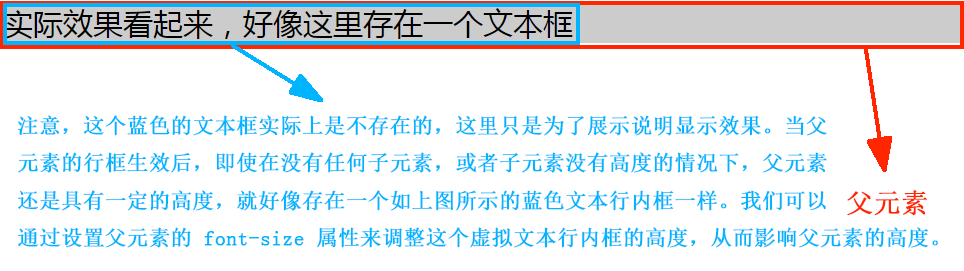
<style>
.page{position:relative;width:964px;height:271px;background:#ffffff}
.page>*{position:absolute;margin:0}
.t1{font:21.3px "SimSun";color:#00b4ff;font-weight:bold}
.t2{font:26.7px "SimSun";color:#ff2600;font-weight:bold}
</style>
<div class="page">
<p class="t1" style="left:17px;top:115px;width:921px;height:133px">注意，这个蓝色的文本框实际上是不存在的，这里只是为了展示说明显示效果。当父<br>元素的行框生效后，即使在没有任何子元素，或者子元素没有高度的情况下，父元素<br>还是具有一定的高度，就好像存在一个如上图所示的蓝色文本行内框一样。我们可以<br>通过设置父元素的 font-size 属性来调整这个虚拟文本行内框的高度，从而影响父元素的高度。</p>
<p class="t2" style="left:847px;top:190px;width:80px;height:26px">父元素</p>
</div>
